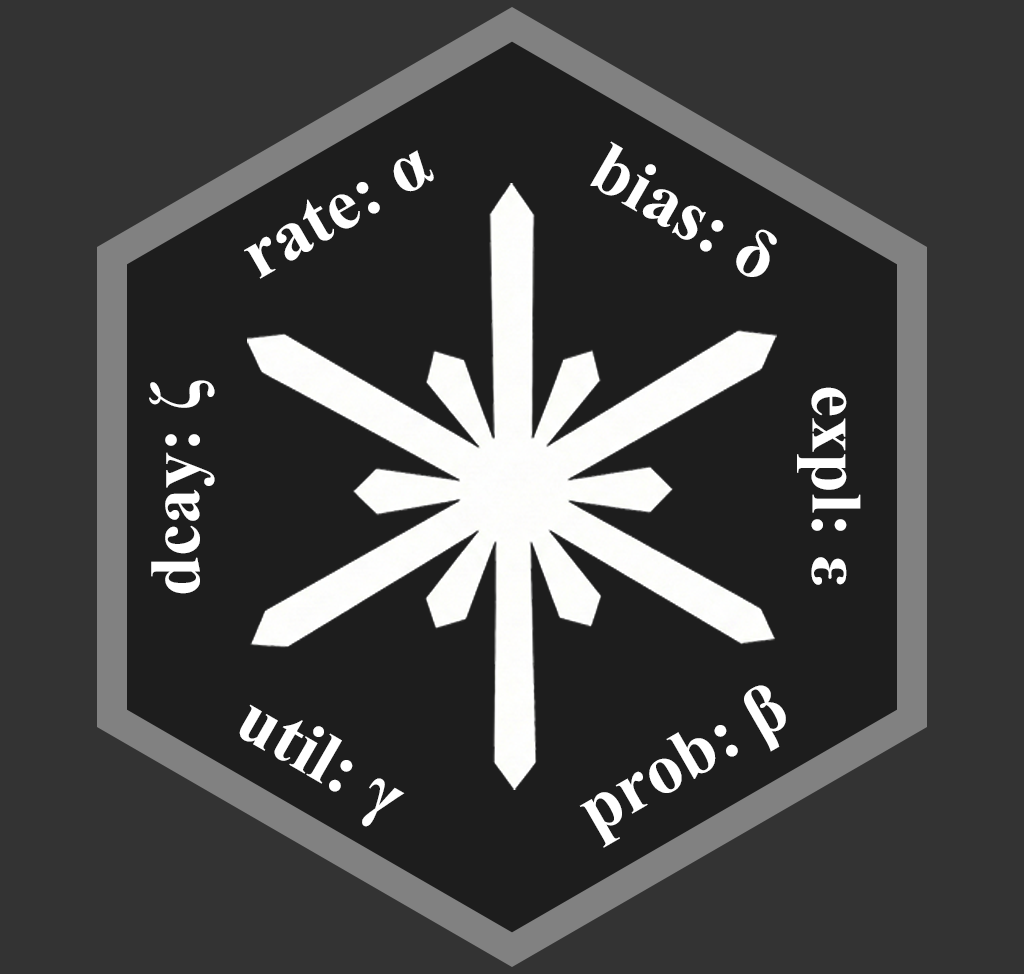
<style>
.page{position:relative;width:1024px;height:974px;background:#1d1d1d}
.page>*{position:absolute;margin:0}
.t1{font:72px "TimesNewRomanPS-BoldMT";color:#ffffff}
</style>
<div class="page">
<p class="t1" style="left:244px;top:150px;width:190px;height:129px;rotate:-30deg">rate: α</p>
<p class="t1" style="left:590px;top:141px;width:187px;height:136px;rotate:30deg">bias: δ</p>
<p class="t1" style="left:149px;top:380px;width:66px;height:214px;rotate:-90deg">dcay: ζ</p>
<p class="t1" style="left:797px;top:387px;width:64px;height:198px;rotate:90deg">expl: ε</p>
<p class="t1" style="left:579px;top:685px;width:207px;height:163px;rotate:-30deg">prob: β</p>
<p class="t1" style="left:239px;top:704px;width:166px;height:123px;rotate:30deg">util: γ</p>
</div>
